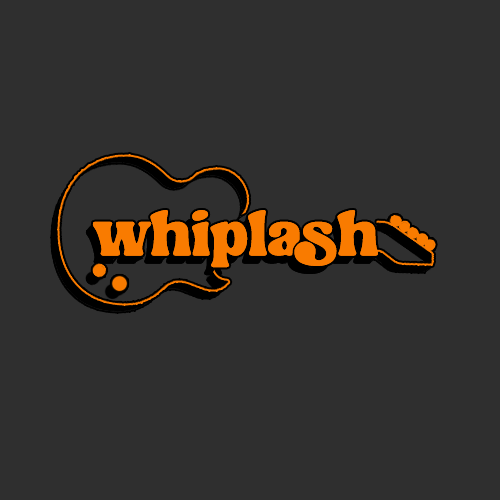
<style>
.page{position:relative;width:500px;height:500px;background:#2f2f2f}
.page>*{position:absolute;margin:0}
.t1{font:63.8px "ShineCoasty";letter-spacing:-0.02em;color:#f97b00}
</style>
<div class="page">
<p class="t1" style="left:92px;top:210px;width:286px;height:58px">whiplash</p>
<p class="t1" style="left:92px;top:210px;width:286px;height:58px">whiplash</p>
</div>
